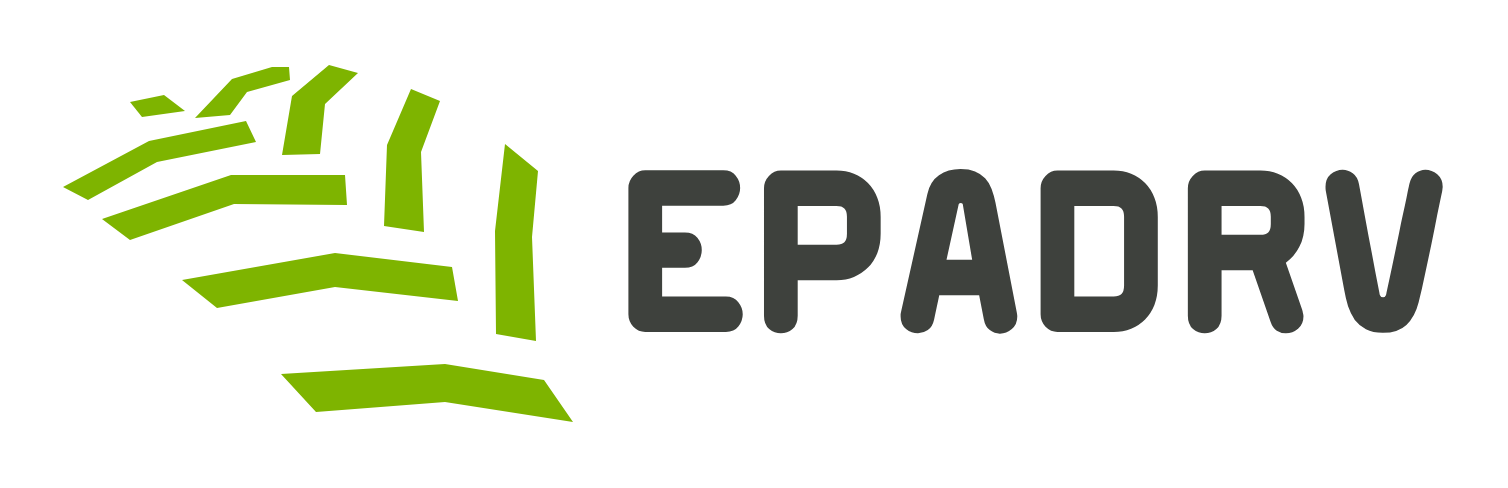
<style>
.page{position:relative;width:1508px;height:488px;background:#ffffff}
.page>*{position:absolute;margin:0}
.t1{font:272.9px "MagdaClean-Black";color:#3e413d;scale:0.95 1}
</style>
<div class="page">
<p class="t1" style="left:628px;top:169px;width:815px;height:165px">EPADRV</p>
</div>
